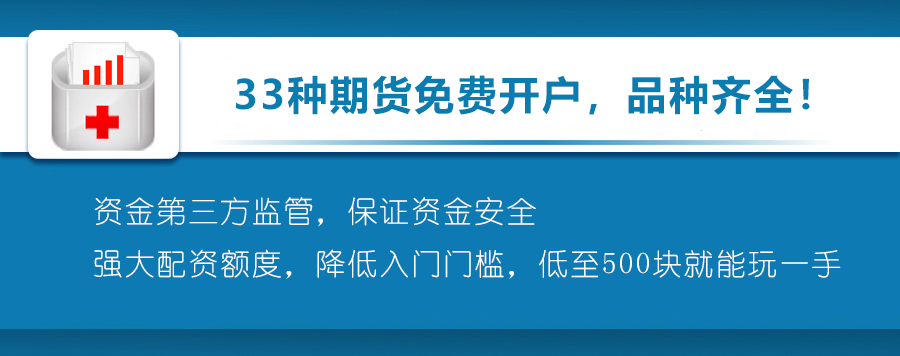
<style>
.page{position:relative;width:900px;height:356px;background:#0d7ab3}
.page>*{position:absolute;margin:0}
.t1{font:40px "MicrosoftYaHei-Bold";letter-spacing:0.06em;color:#097db0}
.t2{font:30px "YouYuan";letter-spacing:0.06em;color:#ffffff}
</style>
<div class="page">
<p class="t1" style="left:236px;top:75px;width:574px;height:40px">33种期货免费开户，品种齐全！</p>
<p class="t2" style="left:94px;top:197px;width:747px;height:82px">资金第三方监管，保证资金安全<br>强大配资额度，降低入门门槛，低至500块就能玩一手</p>
</div>
